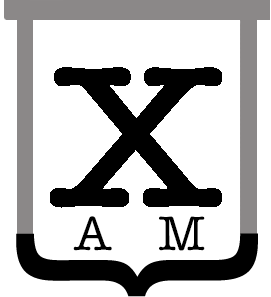
<style>
.page{position:relative;width:271px;height:297px;background:#ffffff}
.page>*{position:absolute;margin:0}
.t1{font:49.8px "AmericanTypewriter";color:#000000}
</style>
<div class="page">
<p class="t1" style="left:73px;top:216px;width:39px;height:35px">A</p>
<p class="t1" style="left:159px;top:216px;width:46px;height:35px">M</p>
</div>
